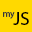
<style>
.page{position:relative;width:32px;height:32px;background:#ffd900}
.page>*{position:absolute;margin:0}
.t1{font:9px "MyriadPro-Regular";color:#373737}
.t2{font:18px "MyriadPro-Regular";color:#000000}
</style>
<div class="page">
<p class="t1" style="left:3px;top:12px;width:12px;height:7px">my</p>
<p class="t2" style="left:13px;top:12px;width:16px;height:13px">JS</p>
</div>
